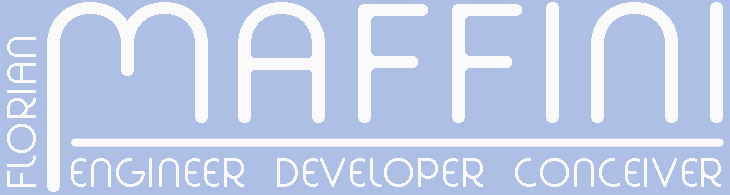
<style>
.page{position:relative;width:730px;height:195px;background:#aebfe5}
.page>*{position:absolute;margin:0}
.t1{font:150px "Fabada";letter-spacing:0.04em;color:#fafafa;scale:1.04 1}
.t2{font:36px "Fabada";letter-spacing:0.007em;color:#fafafa}
</style>
<div class="page">
<p class="t1" style="left:47px;top:2px;width:676px;height:121px">MAFFINI</p>
<p class="t2" style="left:7px;top:37px;width:29px;height:150px;rotate:-90deg">FLORIAN</p>
<p class="t2" style="left:71px;top:158px;width:650px;height:29px">ENGINEER  DEVELOPER  CONCEIVER</p>
</div>
